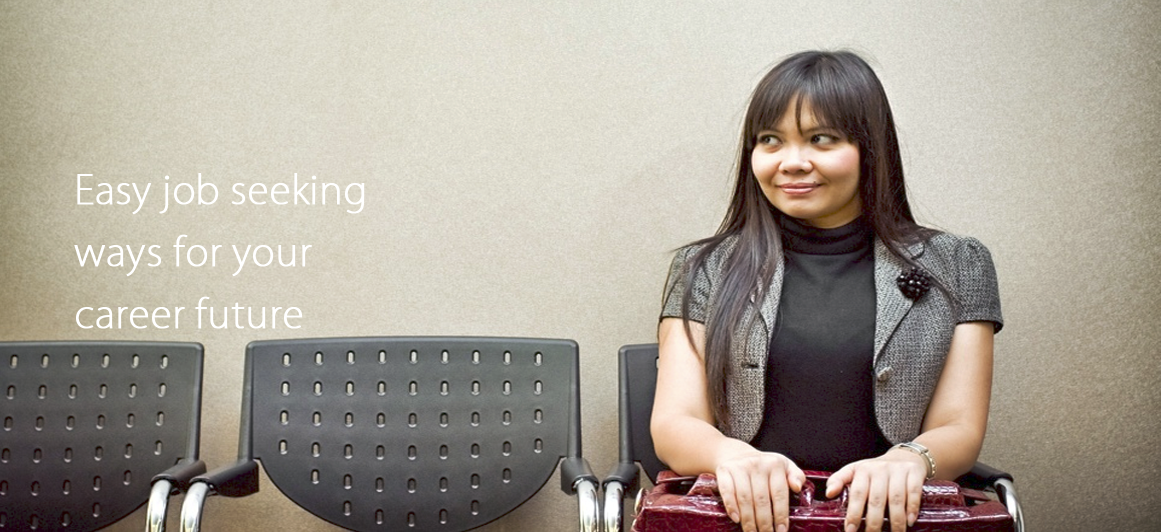
<style>
.page{position:relative;width:1161px;height:532px}
.page>*{position:absolute;margin:0}
.t1{font:38.8px/62.2px "KozGoPr6N-ExtraLight";color:#ffffff;font-weight:bold}
</style>
<div class="page">
<p class="t1" style="left:74px;top:173px;width:291px;height:156px">Easy job seeking<br>ways for your <br>career future</p>
</div>
